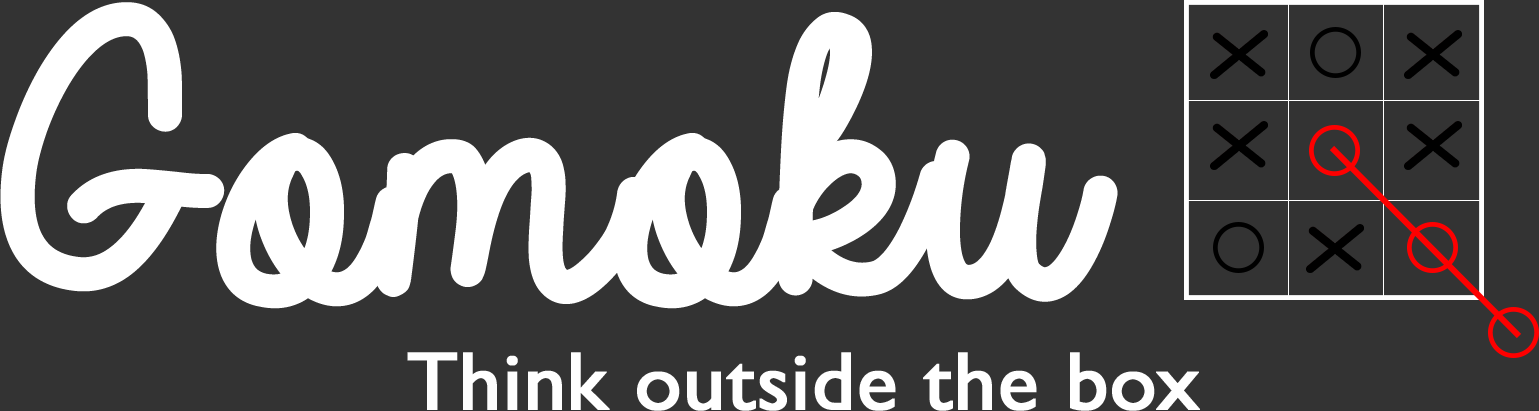
<style>
.page{position:relative;width:1539px;height:411px;background:#333333}
.page>*{position:absolute;margin:0}
.t1{font:416.7px "AlwaysInMyHeart";color:#ffffff;font-weight:bold}
.t2{font:83.3px "GillSans";color:#ffffff;font-weight:bold}
</style>
<div class="page">
<p class="t1" style="left:0px;top:2px;width:1118px;height:307px">Gomoku</p>
<p class="t2" style="left:407px;top:352px;width:793px;height:59px">Think outside the box</p>
</div>
